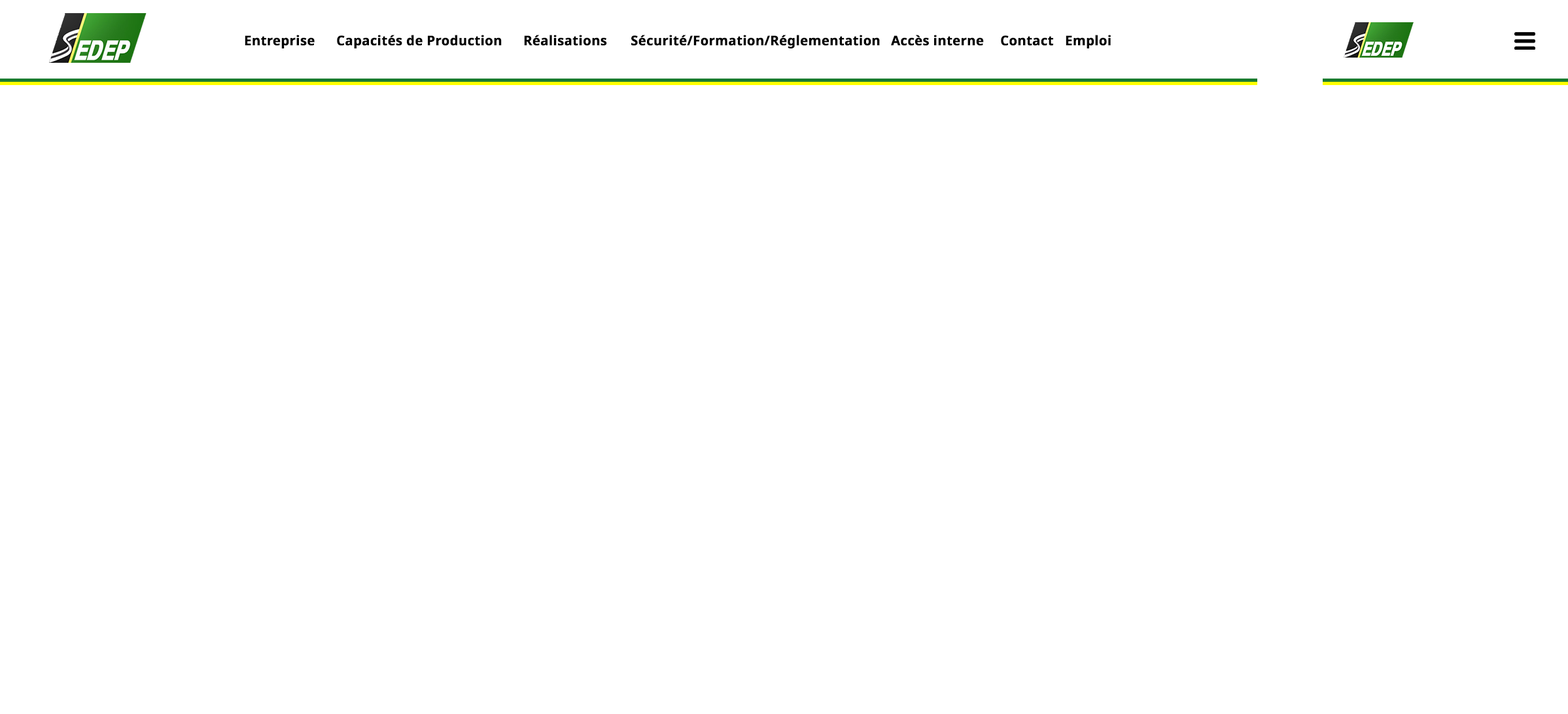
<style>
.page{position:relative;width:1568px;height:714px;background:#ffffff}
.page>*{position:absolute;margin:0}
.t1{font:13.1px "NotoSans-Bold";color:#000000;font-weight:bold}
</style>
<div class="page">
<p class="t1" style="left:245px;top:35px;width:70px;height:13px">Entreprise</p>
<p class="t1" style="left:337px;top:35px;width:165px;height:13px">Capacités de Production</p>
<p class="t1" style="left:524px;top:35px;width:83px;height:11px">Réalisations</p>
<p class="t1" style="left:631px;top:35px;width:249px;height:13px">Sécurité/Formation/Réglementation</p>
<p class="t1" style="left:891px;top:35px;width:93px;height:11px">Accès interne</p>
<p class="t1" style="left:1001px;top:35px;width:52px;height:11px">Contact</p>
<p class="t1" style="left:1066px;top:35px;width:45px;height:13px">Emploi</p>
</div>
